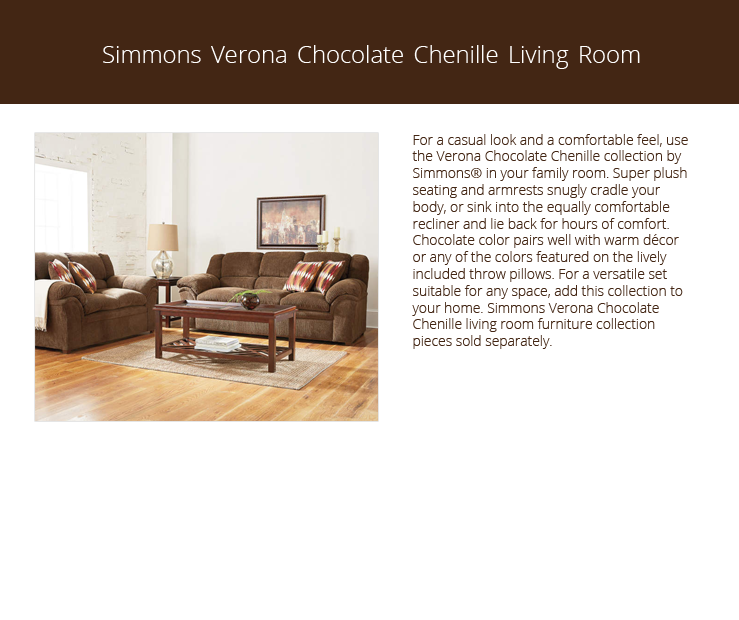
<style>
.page{position:relative;width:739px;height:620px;background:#ffffff}
.page>*{position:absolute;margin:0}
.t1{font:24px "OpenSans-Light";letter-spacing:-0.005em;color:#ffffff}
.t2{font:14px "OpenSans-Light";letter-spacing:-0.005em;color:#432614}
</style>
<div class="page">
<p class="t1" style="left:103px;top:45px;width:537px;height:24px">Simmons Verona Chocolate Chenille Living Room Furniture Collection</p>
<p class="t2" style="left:412px;top:134px;width:276px;height:215px">For a casual look and a comfortable feel, use the Verona Chocolate Chenille collection by Simmons® in your family room. Super plush seating and armrests snugly cradle your body, or sink into the equally comfortable recliner and lie back for hours of comfort. Chocolate color pairs well with warm décor or any of the colors featured on the lively included throw pillows. For a versatile set suitable for any space, add this collection to your home. Simmons Verona Chocolate Chenille living room furniture collection pieces sold separately.</p>
</div>
